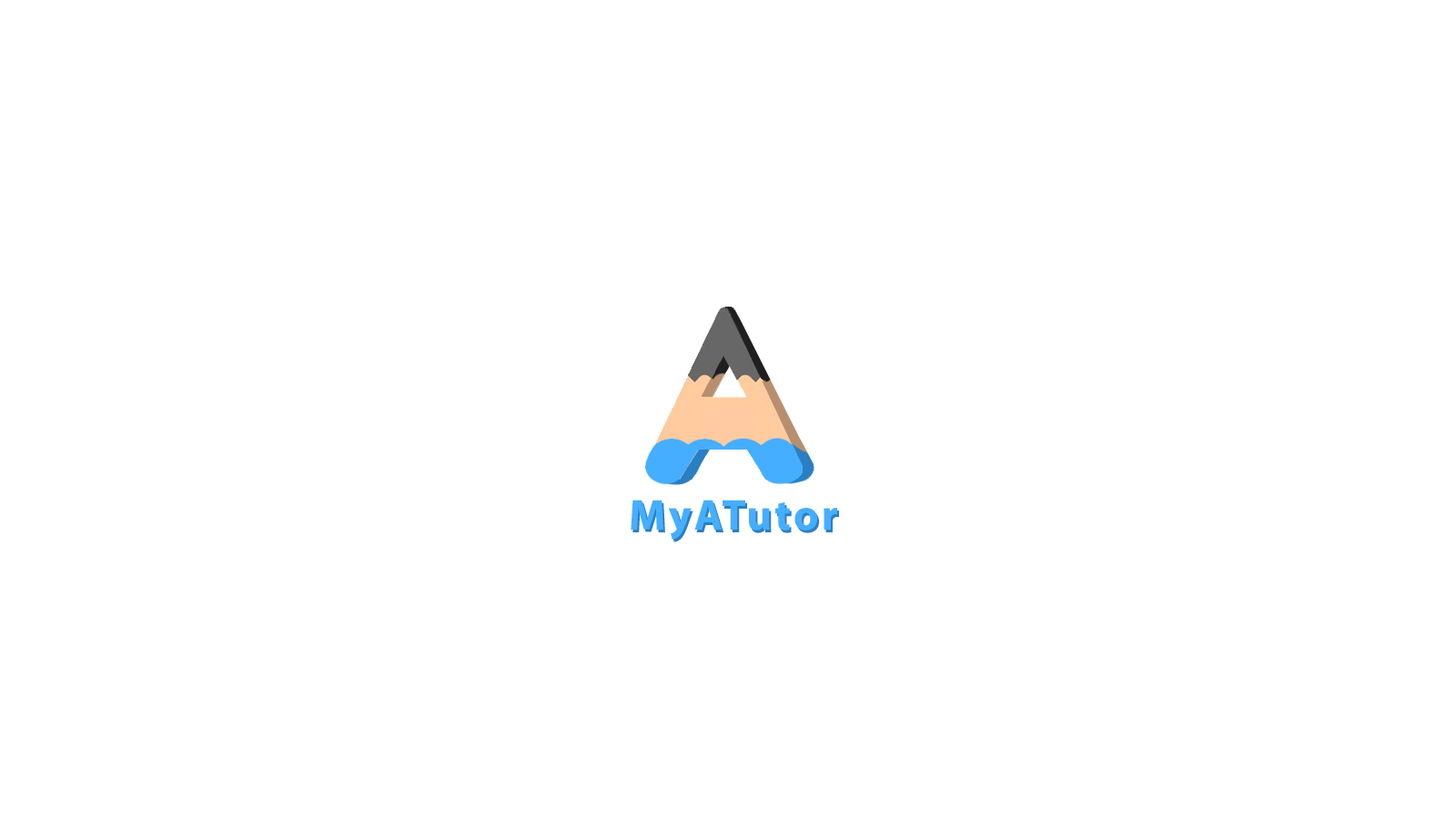
<style>
.page{position:relative;width:1456px;height:819px;background:#ffffff}
.page>*{position:absolute;margin:0}
.t1{font:60.7px "MyriadArabic-Bold";letter-spacing:0.05em;color:#46aeff}
.t2{font:60.7px "MyriadArabic-Bold";letter-spacing:0.05em}
</style>
<div class="page">
<p class="t1" style="left:631px;top:500px;width:206px;height:40px">MyATutor</p>
<p class="t2" style="left:632px;top:502px;width:207px;height:40px">MyATutor</p>
</div>
